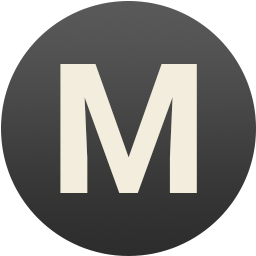
<style>
.page{position:relative;width:256px;height:256px;background:#ffffff}
.page>*{position:absolute;margin:0}
.t1{font:181.7px "Roboto-Bold";color:#f2eddc}
</style>
<div class="page">
<p class="t1" style="left:60px;top:64px;width:137px;height:129px">М</p>
</div>
